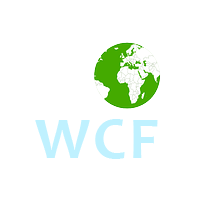
<style>
.page{position:relative;width:200px;height:200px;background:#ffffff}
.page>*{position:absolute;margin:0}
.t1{font:60px "Candara-Bold";letter-spacing:0.05em;color:#bff1ff}
</style>
<div class="page">
<p class="t1" style="left:35px;top:119px;width:123px;height:40px">WCF</p>
</div>
